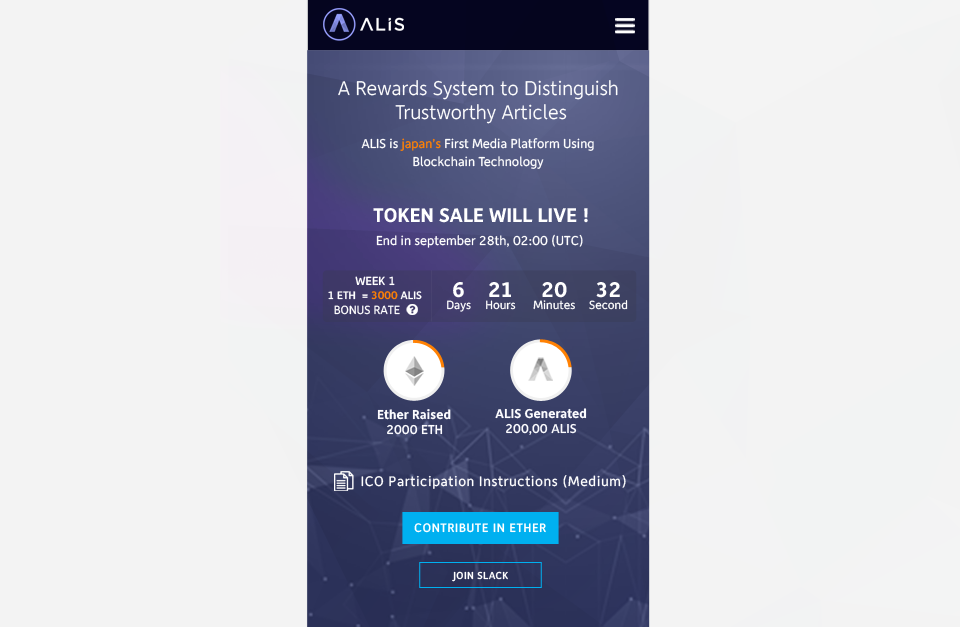
<style>
.page{position:relative;width:960px;height:627px;background:#f3f3f3}
.page>*{position:absolute;margin:0}
.t1{font:20px/24px "Depot-Light";color:#ffffff}
.t2{font:13px/18px "Depot-Regular";color:#ffffff}
.t3{font:13px/18px "Depot-Regular";color:#ff8103}
.t4{font:20px "Depot-Bold";color:#ffffff;text-transform:uppercase}
.t5{font:13px "Depot-Regular";color:#ffffff}
.t6{font:12px "Depot-Medium";color:#ffffff}
.t7{font:11px "Depot-Medium";color:#ffffff}
.t8{font:11px "Depot-Medium";color:#ff8103}
.t9{font:12px/12px "Depot-Regular";color:#ffffff}
.t10{font:21.5px/12px "Depot-Bold";color:#ffffff}
.t11{font:12px "Depot-Regular";color:#ffffff;text-transform:uppercase}
.t12{font:13px "Depot-Bold";color:#fcfcff}
.t13{font:13px "Depot-Medium";color:#fcfcff}
.t14{font:14px "Depot-Regular";letter-spacing:0.04em;color:#ffffff}
.t15{font:12.5px "Depot-Medium";letter-spacing:0.04em;color:#ffffff;text-transform:uppercase}
.t16{font:10.3px "Depot-Medium";letter-spacing:0.04em;color:#ffffff;text-transform:uppercase}
</style>
<div class="page">
<p class="t1" style="left:338px;top:80px;width:280px;height:44px;text-align:center">A Rewards System to Distinguish <br>Trustworthy Articles</p>
<p class="t2" style="left:361px;top:138px;width:233px;height:31px;text-align:center">ALIS is <span class="t3">japan’s</span> First Media Platform Using<br>Blockchain Technology</p>
<p class="t4" style="left:373px;top:208px;width:215px;height:15px">Token sale will live !</p>
<p class="t5" style="left:376px;top:234px;width:207px;height:14px">End in september 28th, 02:00 (UTC)</p>
<p class="t6" style="left:355px;top:276px;width:40px;height:10px">WEEK 1</p>
<p class="t7" style="left:328px;top:291px;width:94px;height:9px">1 ETH  = <span class="t8">3000</span> ALIS</p>
<p class="t9" style="left:447px;top:282px;width:24px;height:30px;text-align:center"><span class="t10">6<br></span>Days</p>
<p class="t9" style="left:486px;top:282px;width:30px;height:28px;text-align:center"><span class="t10">21<br></span>Hours</p>
<p class="t9" style="left:533px;top:282px;width:42px;height:28px;text-align:center"><span class="t10">20<br></span>Minutes</p>
<p class="t9" style="left:589px;top:282px;width:39px;height:28px;text-align:center"><span class="t10">32<br></span>Second</p>
<p class="t11" style="left:334px;top:305px;width:66px;height:10px">bonus rate</p>
<p class="t12" style="left:377px;top:409px;width:74px;height:11px">Ether Raised</p>
<p class="t12" style="left:495px;top:408px;width:92px;height:11px">ALIS Generated</p>
<p class="t13" style="left:387px;top:424px;width:56px;height:11px">2000 ETH</p>
<p class="t13" style="left:506px;top:423px;width:71px;height:12px">200,00 ALIS</p>
<p class="t14" style="left:361px;top:475px;width:265px;height:14px">ICO Participation Instructions (Medium)</p>
<p class="t15" style="left:414px;top:523px;width:132px;height:10px">contribute in ether</p>
<p class="t16" style="left:452px;top:571px;width:56px;height:11px">join slack</p>
</div>
